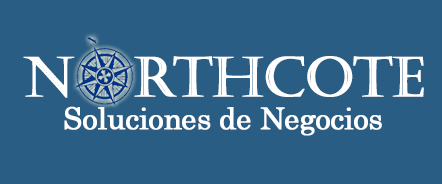
<style>
.page{position:relative;width:442px;height:184px;background:#295d83}
.page>*{position:absolute;margin:0}
.t1{font:55px "Castellar";letter-spacing:-0.025em;color:#ffffff;font-weight:bold}
.t2{font:30px "Century";letter-spacing:-0.025em;color:#ffffff;font-weight:bold}
</style>
<div class="page">
<p class="t1" style="left:23px;top:56px;width:401px;height:42px">N   RTHCOTE</p>
<p class="t2" style="left:64px;top:106px;width:318px;height:30px">Soluciones de Negocios</p>
</div>
